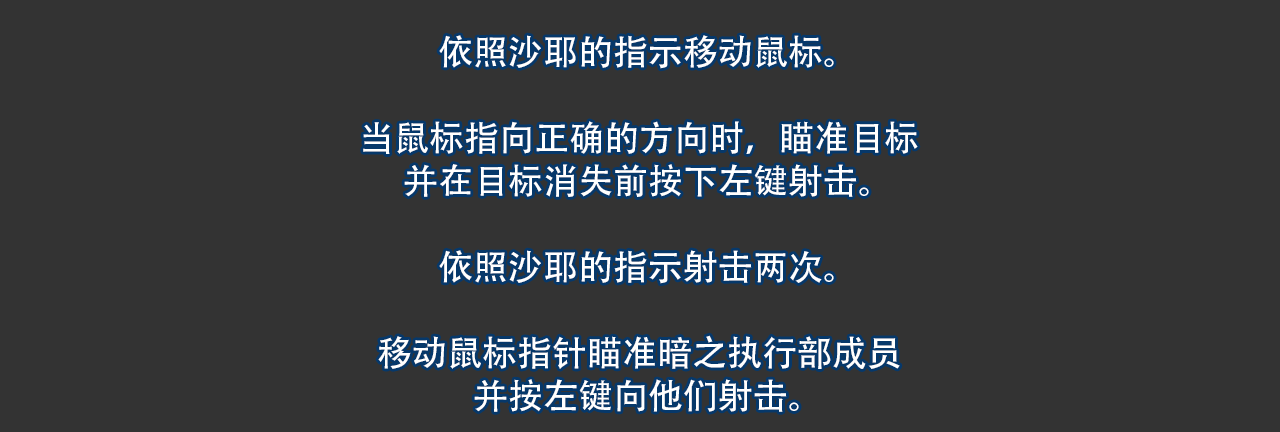
<style>
.page{position:relative;width:1280px;height:432px;background:#333333}
.page>*{position:absolute;margin:0}
.t1{font:35px/43px "AdobeHeitiStd-Regular";color:#ffffff}
</style>
<div class="page">
<p class="t1" style="left:363px;top:35px;width:555px;height:377px;text-align:center">依照沙耶的指示移动鼠标。<br><br>当鼠标指向正确的方向时，瞄准目标<br>并在目标消失前按下左键射击。<br><br>依照沙耶的指示射击两次。<br><br>移动鼠标指针瞄准暗之执行部成员<br>并按左键向他们射击。</p>
</div>
